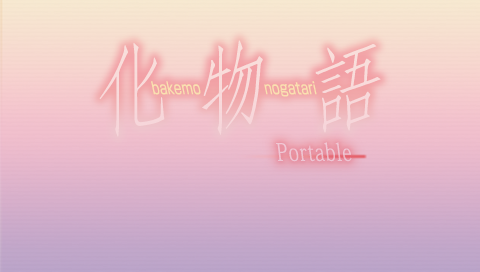
<style>
.page{position:relative;width:480px;height:272px}
.page>*{position:absolute;margin:0}
.t1{font:200px "Typeface";letter-spacing:0.14em;color:#fae2e2;scale:0.75 1}
.t2{font:200px "Typeface";letter-spacing:0.13em;color:#fae2e2;scale:0.7 1}
.t3{font:200px "Typeface";letter-spacing:0.13em;color:#fae2e2;scale:0.75 1}
.t4{font:16.5px "ShinGoPro-Regular";color:#fdeca0;font-weight:bold;scale:0.7 1}
.t5{font:24px "AdobeFangsongStd-Regular";letter-spacing:0.05em;color:#f3d3dd;scale:0.77 1}
</style>
<div class="page">
<p class="t1" style="left:99px;top:40px;width:282px;height:97px">a<span class="t2">b </span><span class="t3">c</span></p>
<p class="t4" style="left:151px;top:81px;width:166px;height:16px">bakemo                nogatari</p>
<p class="t5" style="left:276px;top:142px;width:76px;height:20px;opacity:0.73">Portable</p>
</div>
